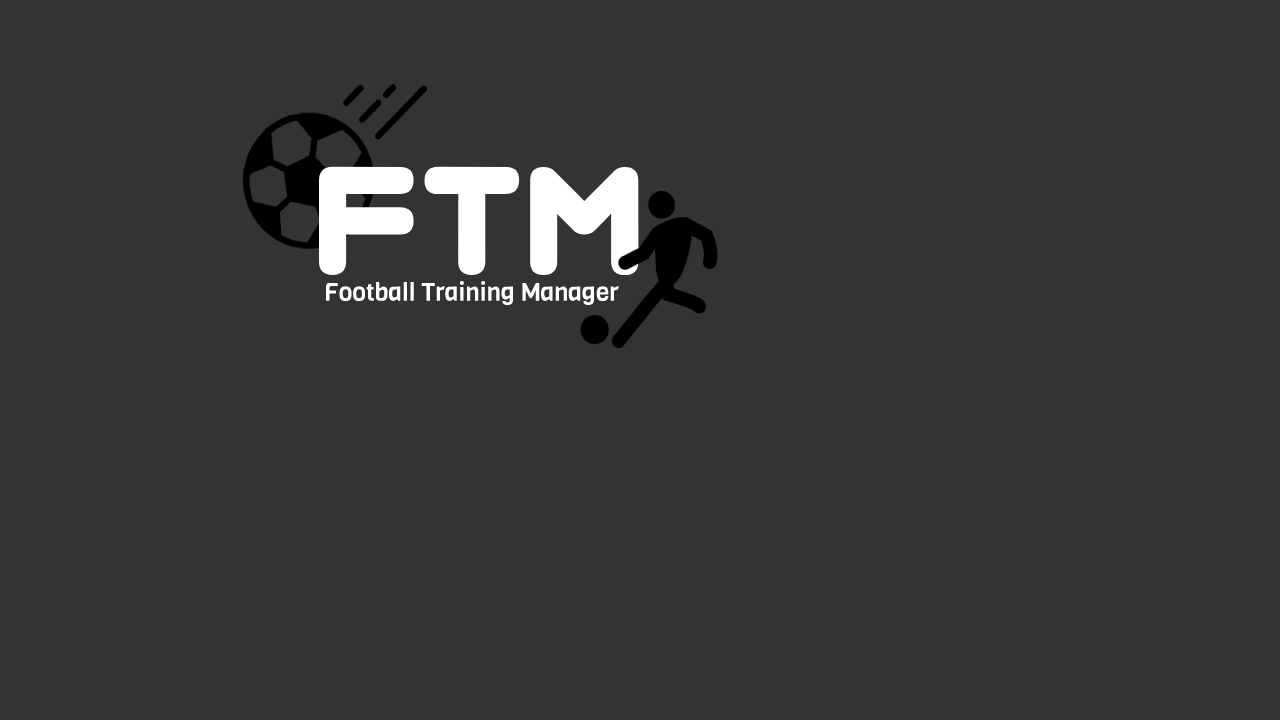
<style>
.page{position:relative;width:1280px;height:720px;background:#333333}
.page>*{position:absolute;margin:0}
.t1{font:173px "Virgo01";color:#ffffff}
.t2{font:25px "Viga-Regular";color:#ffffff}
</style>
<div class="page">
<p class="t1" style="left:318px;top:166px;width:321px;height:110px">FTm</p>
<p class="t2" style="left:326px;top:281px;width:293px;height:25px">Football Training Manager</p>
</div>
